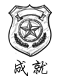
<style>
.page{position:relative;width:60px;height:80px;background:#ffffff}
.page>*{position:absolute;margin:0}
.t1{font:18px "STXingkaiSC-Light";letter-spacing:0.055em;color:#000000}
</style>
<div class="page">
<p class="t1" style="left:14px;top:59px;width:34px;height:17px">成就</p>
</div>
